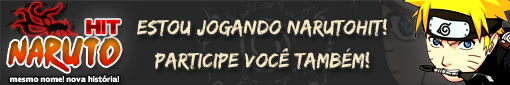
<style>
.page{position:relative;width:510px;height:85px}
.page>*{position:absolute;margin:0}
.t1{font:17.8px "BorisBlackBloxx"}
.t2{font:21px "EdoSZ";color:#f4e7c4}
.t3{font:31.5px "Ninja-Naruto"}
.t4{font:7.5px "BorisBlackBloxx";color:#ffffff}
</style>
<div class="page">
<p class="t1" style="left:86px;top:20px;width:34px;height:14px">HIT</p>
<p class="t2" style="left:137px;top:18px;width:250px;height:19px">estou jogando narutoHIT!</p>
<p class="t3" style="left:8px;top:37px;width:113px;height:35px">naruto</p>
<p class="t2" style="left:155px;top:48px;width:215px;height:22px">participe você também!</p>
<p class="t4" style="left:10px;top:75px;width:109px;height:8px">mesmo nome! nova história!</p>
</div>
